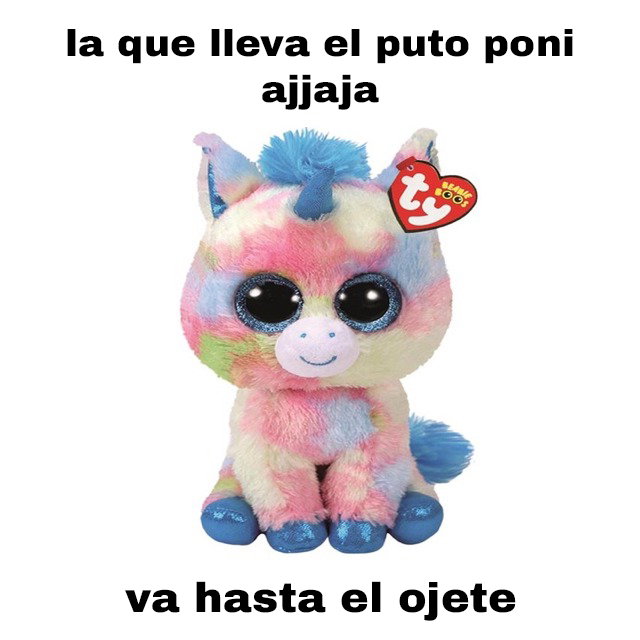
<style>
.page{position:relative;width:640px;height:640px;background:#ffffff}
.page>*{position:absolute;margin:0}
.t1{font:37.6px "ArchivoBlack-Regular";color:#000000;scale:1.04 1}
.t2{font:41.4px "ArchivoBlack-Regular";color:#000000;scale:1.04 1}
</style>
<div class="page">
<p class="t1" style="left:67px;top:29px;width:506px;height:81px;text-align:center">la que lleva el puto poni<br>ajjaja</p>
<p class="t2" style="left:125px;top:581px;width:391px;height:40px">va hasta el ojete</p>
</div>
